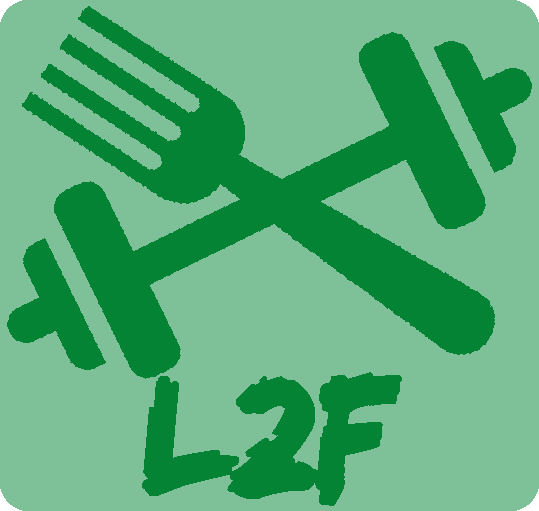
<style>
.page{position:relative;width:539px;height:511px;background:#7ec097}
.page>*{position:absolute;margin:0}
.t1{font:165px "EdoSZ";color:#048334;font-weight:bold}
</style>
<div class="page">
<p class="t1" style="left:142px;top:372px;width:260px;height:134px">L2F</p>
</div>
